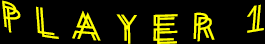
<style>
.page{position:relative;width:265px;height:44px;background:#000000}
.page>*{position:absolute;margin:0}
.t1{font:53.3px "entanglement";color:#ffff00}
</style>
<div class="page">
<p class="t1" style="left:2px;top:0px;width:262px;height:44px">PLAYER 1</p>
</div>
